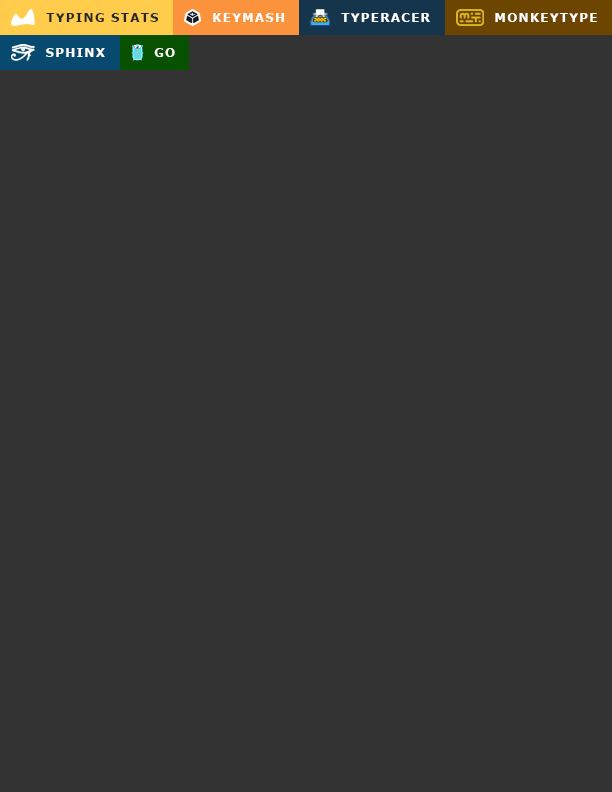
<style>
.page{position:relative;width:612px;height:792px;background:#333333}
.page>*{position:absolute;margin:0}
.t1{font:12px "Verdana-Bold";letter-spacing:0.1em;color:#282828}
.t2{font:12px "Verdana-Bold";letter-spacing:0.1em;color:#ffffff}
</style>
<div class="page">
<p class="t1" style="left:46px;top:13px;width:113px;height:9px">TYPING STATS</p>
<p class="t2" style="left:213px;top:13px;width:72px;height:9px">KEYMASH</p>
<p class="t2" style="left:341px;top:13px;width:89px;height:9px">TYPERACER</p>
<p class="t2" style="left:495px;top:13px;width:102px;height:9px">MONKEYTYPE</p>
<p class="t2" style="left:46px;top:48px;width:59px;height:9px">SPHINX</p>
<p class="t2" style="left:154px;top:48px;width:21px;height:9px">GO</p>
</div>
